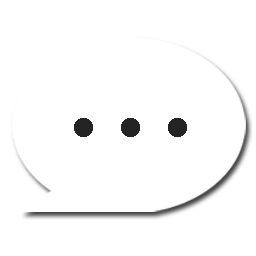
<style>
.page{position:relative;width:256px;height:256px;background:#ffffff}
.page>*{position:absolute;margin:0}
.t1{font:128px "TrebuchetMS";color:#242424}
</style>
<div class="page">
<p class="t1" style="left:74px;top:118px;width:113px;height:19px">...</p>
</div>
